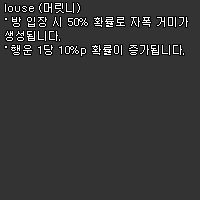
<style>
.page{position:relative;width:200px;height:200px;background:#333333}
.page>*{position:absolute;margin:0}
.t1{font:11px/14px "Dotum";color:#ffffff}
</style>
<div class="page">
<p class="t1" style="left:5px;top:3px;width:183px;height:53px">louse (머릿니)<br>˚ 방 입장 시 50% 확률로 자폭 거미가<br>생성됩니다.<br>˚ 행운 1당 10%p 확률이 증가됩니다.</p>
</div>
